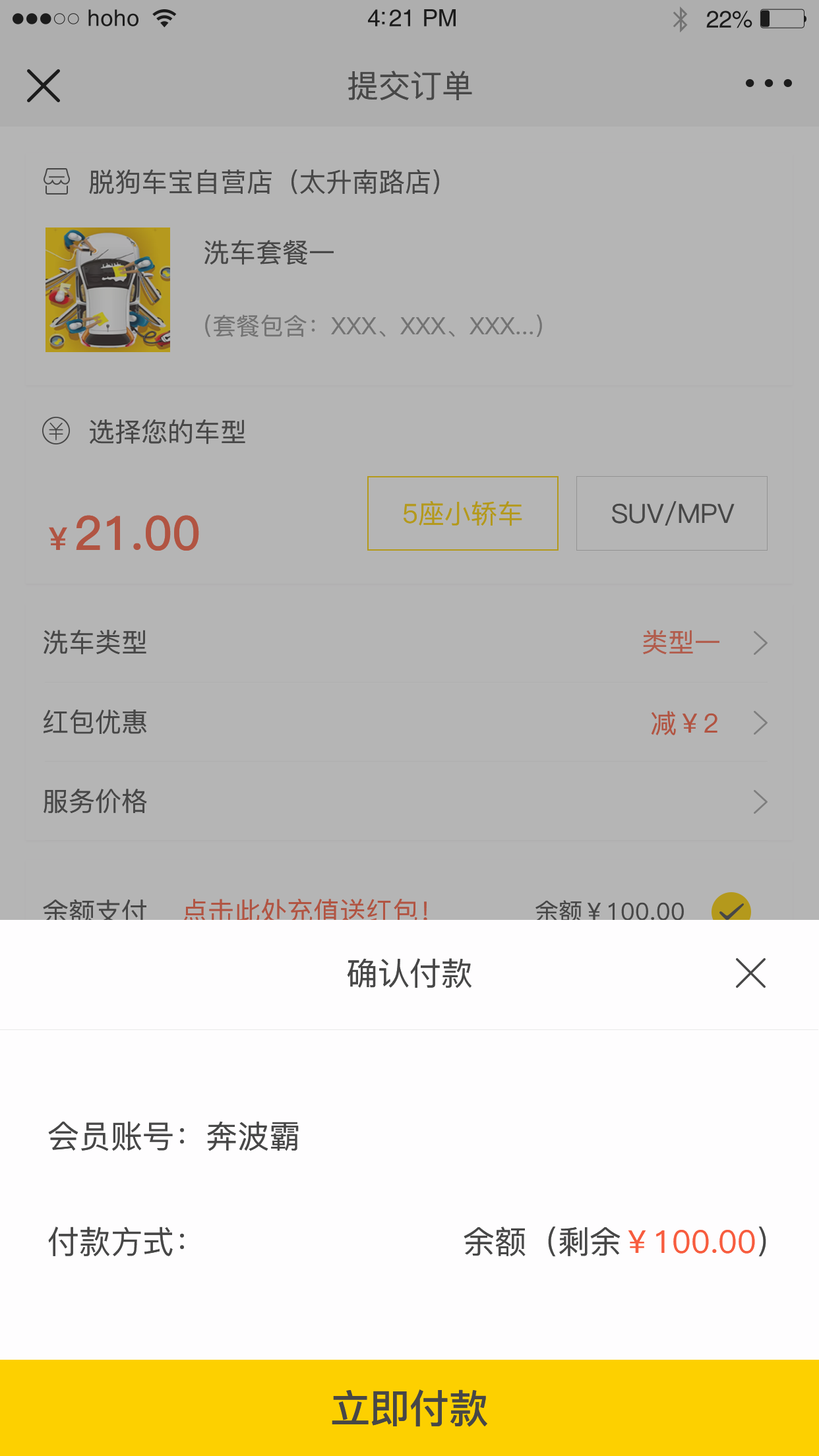
<style>
.page{position:relative;width:819px;height:1456px;background:#b5b5b5}
.page>*{position:absolute;margin:0}
.t1{font:22.8px "Helvetica";letter-spacing:0.02em;color:#1c1c1c}
.t2{font:23.8px "Helvetica";letter-spacing:-0.02em;color:#1c1c1c}
.t3{font:31.7px "PingFang-SC-Medium";color:#474747}
.t4{font:26.4px "PingFang-SC-Medium";color:#474747}
.t5{font:23.7px "PingFang-SC-Medium";color:#737373}
.t6{font:26.4px "PingFang-SC-Medium";color:#b4991c}
.t7{font:47.5px "PingFang-SC-Bold";color:#b15442}
.t8{font:31.7px "PingFang-SC-Bold";color:#b15442}
.t9{font:26.4px "PingFang-SC-Medium";color:#b15c4c}
.t10{font:26.4px "PingFang-SC-Medium";color:#b15442}
.t11{font:23.7px "PingFang-SC-Medium";color:#474747}
.t12{font:31.7px "PingFang-SC-Medium";color:#f75c3e}
.t13{font:39.6px "PingFang-SC-Bold";color:#474747}
</style>
<div class="page">
<p class="t1" style="left:88px;top:9px;width:50px;height:17px">hoho</p>
<p class="t2" style="left:368px;top:9px;width:88px;height:17px">4:21 PM</p>
<p class="t2" style="left:706px;top:11px;width:46px;height:17px">22%</p>
<p class="t3" style="left:348px;top:71px;width:124px;height:29px">提交订单</p>
<p class="t4" style="left:89px;top:169px;width:350px;height:26px">脱狗车宝自营店（太升南路店）</p>
<p class="t4" style="left:204px;top:240px;width:130px;height:25px">洗车套餐一</p>
<p class="t5" style="left:205px;top:315px;width:337px;height:22px">（套餐包含：XXX、XXX、XXX...）</p>
<p class="t4" style="left:90px;top:419px;width:155px;height:25px">选择您的车型</p>
<p class="t6" style="left:404px;top:500px;width:118px;height:26px">5座小轿车</p>
<p class="t4" style="left:612px;top:501px;width:123px;height:25px">SUV/MPV</p>
<p class="t7" style="left:49px;top:515px;width:150px;height:36px"><span class="t8">￥</span>21.00</p>
<p class="t4" style="left:44px;top:630px;width:102px;height:25px">洗车类型</p>
<p class="t9" style="left:643px;top:630px;width:76px;height:24px">类型一</p>
<p class="t4" style="left:44px;top:710px;width:103px;height:24px">红包优惠</p>
<p class="t10" style="left:651px;top:711px;width:66px;height:24px">减￥2</p>
<p class="t4" style="left:44px;top:789px;width:103px;height:24px">服务价格</p>
<p class="t4" style="left:43px;top:899px;width:103px;height:25px">余额支付</p>
<p class="t10" style="left:182px;top:899px;width:245px;height:24px">点击此处充值送红包！</p>
<p class="t11" style="left:535px;top:900px;width:149px;height:23px">余额￥100.00</p>
<p class="t3" style="left:347px;top:958px;width:124px;height:30px">确认付款</p>
<p class="t3" style="left:48px;top:1121px;width:251px;height:30px">会员账号：奔波霸</p>
<p class="t3" style="left:48px;top:1227px;width:136px;height:29px">付款方式：</p>
<p class="t12" style="left:464px;top:1227px;width:302px;height:30px"><span class="t3">余额（剩余</span>￥100.00<span class="t3">）</span></p>
<p class="t13" style="left:332px;top:1389px;width:155px;height:38px">立即付款</p>
</div>
